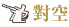
<style>
.page{position:relative;width:69px;height:27px;background:#ffffff}
.page>*{position:absolute;margin:0}
.t1{font:18px "RyuminPr6N-ExBold";color:#af9441}
</style>
<div class="page">
<p class="t1" style="left:33px;top:4px;width:35px;height:18px">對空</p>
</div>
